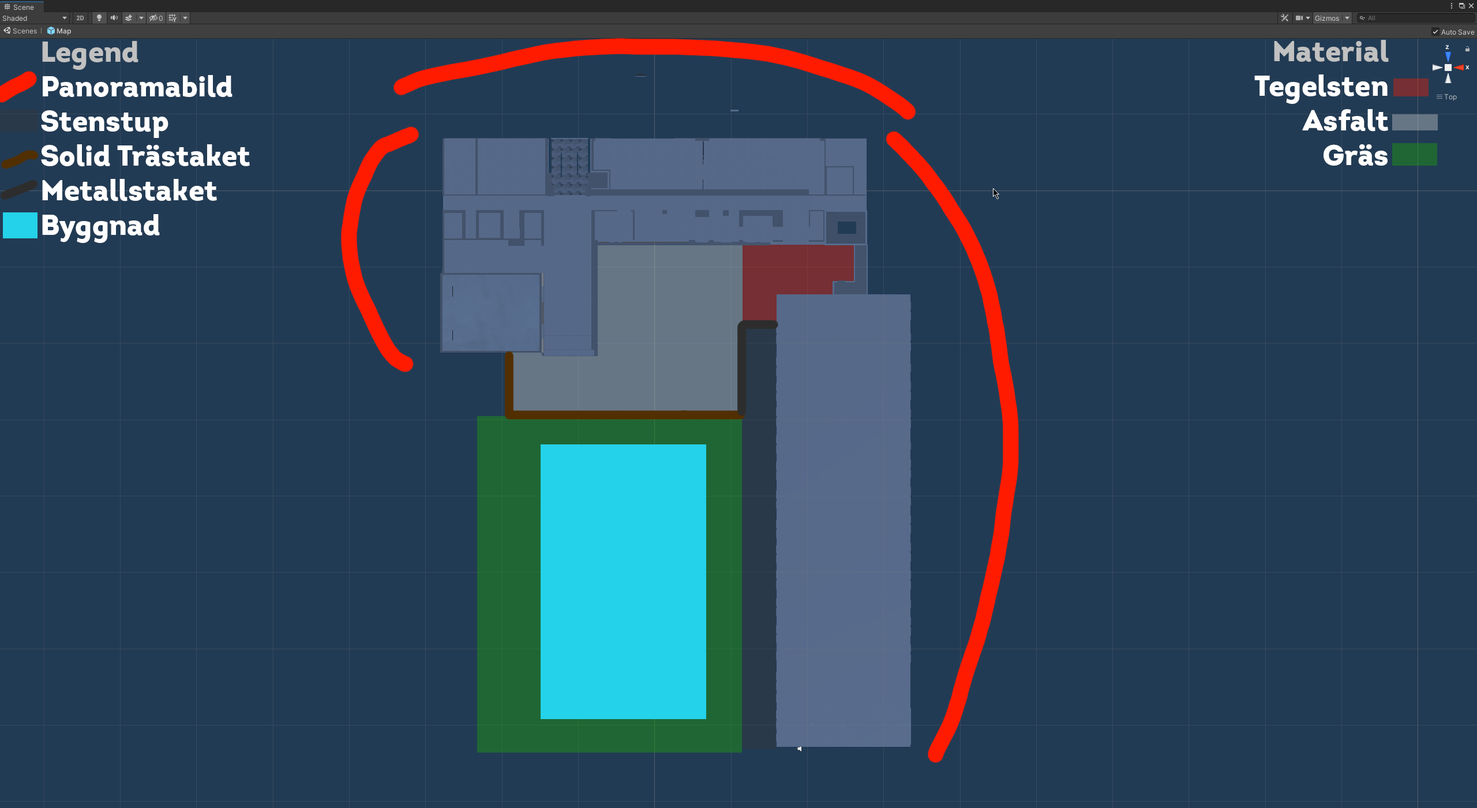
<style>
.page{position:relative;width:1477px;height:808px;background:#223b54}
.page>*{position:absolute;margin:0}
.t1{font:28.8px "Intro-Black";color:#ffffff}
.t2{font:28.8px "Intro-Black";color:#c1c1c1}
</style>
<div class="page">
<p class="t1" style="left:41px;top:41px;width:209px;height:202px"><span class="t2">Legend<br></span>Panoramabild<br>Stenstup<br>Solid Trästaket<br>Metallstaket<br>Byggnad</p>
<p class="t1" style="left:1254px;top:40px;width:134px;height:126px;text-align:right"><span class="t2">Material<br></span>Tegelsten<br>Asfalt<br>Gräs</p>
</div>
